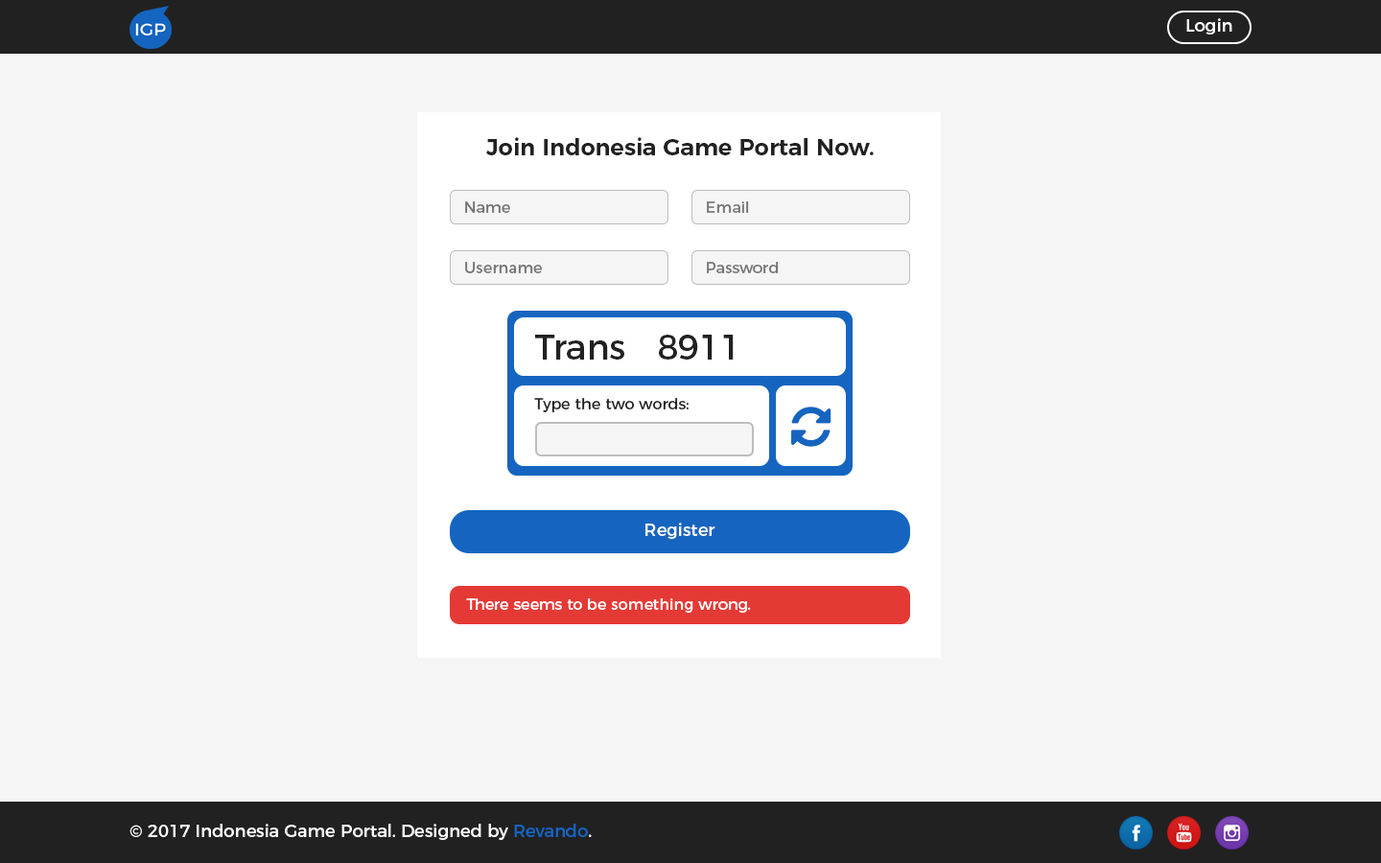
<style>
.page{position:relative;width:1381px;height:863px;background:#f5f5f5}
.page>*{position:absolute;margin:0}
.t1{font:17.3px "Montserrat-Regular";color:#ffffff}
.t2{font:23px "Montserrat-SemiBold";color:#212121}
.t3{font:15.3px "Montserrat-Regular";color:#757575}
.t4{font:34.5px "Montserrat-Regular";color:#212121}
.t5{font:15.3px "Montserrat-Regular";color:#212121}
.t6{font:15.3px "Montserrat-Regular";color:#ffffff}
.t7{font:17.3px "Montserrat-Regular";color:#1565c0}
</style>
<div class="page">
<p class="t1" style="left:1187px;top:18px;width:46px;height:17px">Login</p>
<p class="t2" style="left:486px;top:137px;width:388px;height:18px">Join Indonesia Game Portal Now.</p>
<p class="t3" style="left:465px;top:201px;width:45px;height:12px">Name</p>
<p class="t3" style="left:707px;top:201px;width:42px;height:12px">Email</p>
<p class="t3" style="left:465px;top:262px;width:77px;height:11px">Username</p>
<p class="t3" style="left:707px;top:262px;width:72px;height:11px">Password</p>
<p class="t4" style="left:535px;top:335px;width:199px;height:25px">Trans   8911</p>
<p class="t5" style="left:534px;top:398px;width:155px;height:14px">Type the two words:</p>
<p class="t1" style="left:646px;top:523px;width:70px;height:16px">Register</p>
<p class="t6" style="left:466px;top:599px;width:285px;height:14px">There seems to be something wrong.</p>
<p class="t1" style="left:129px;top:824px;width:463px;height:16px">© 2017 Indonesia Game Portal. Designed by <span class="t7">Revando</span>.</p>
</div>
